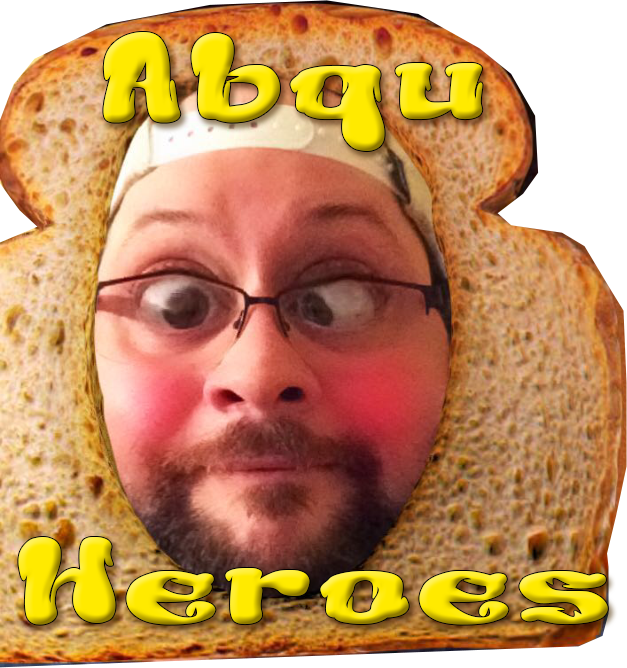
<style>
.page{position:relative;width:627px;height:668px}
.page>*{position:absolute;margin:0}
.t1{font:150px "CreamyButter"}
</style>
<div class="page">
<p class="t1" style="left:103px;top:32px;width:380px;height:119px">Abqu</p>
<p class="t1" style="left:18px;top:537px;width:590px;height:88px">Heroes</p>
</div>
